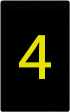
<style>
.page{position:relative;width:70px;height:112px;background:#000000}
.page>*{position:absolute;margin:0}
.t1{font:67px "MyriadPro-Regular";color:#e6e300}
</style>
<div class="page">
<p class="t1" style="left:19px;top:35px;width:32px;height:44px">4</p>
</div>
